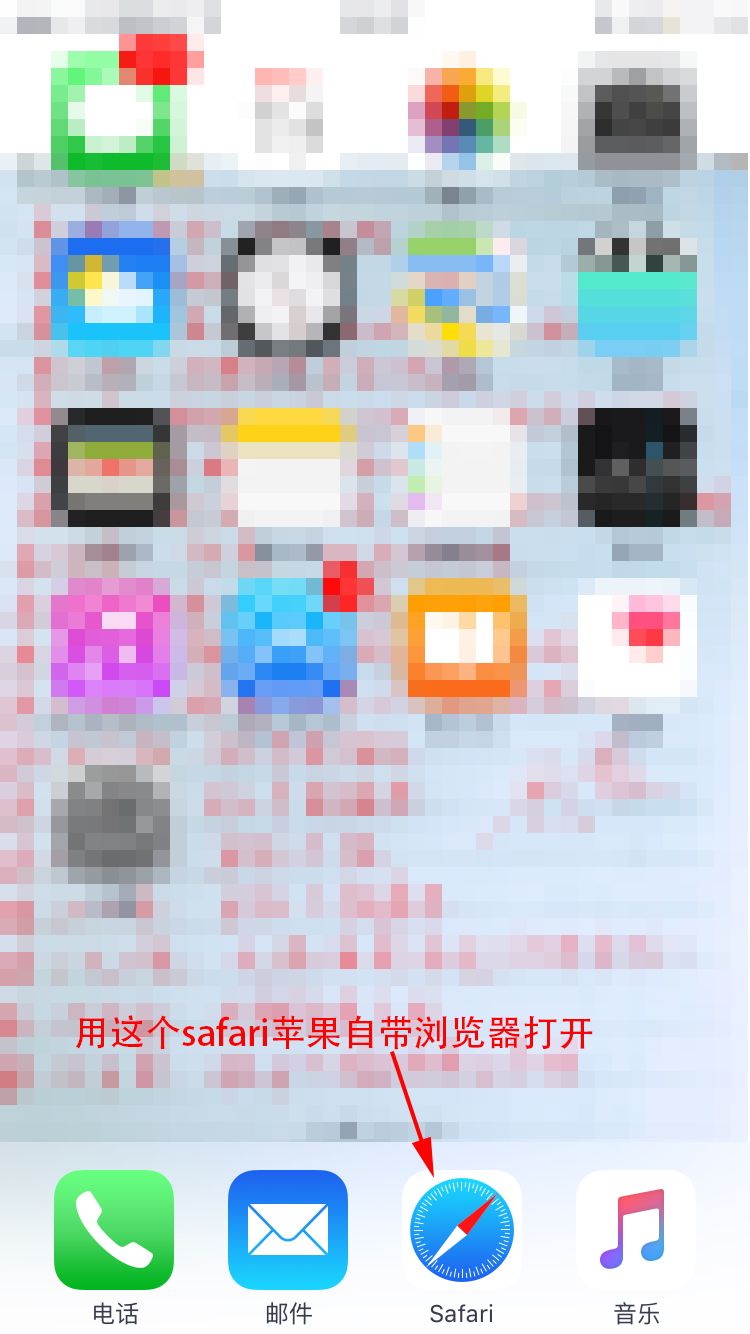
<style>
.page{position:relative;width:750px;height:1334px}
.page>*{position:absolute;margin:0}
.t1{font:36px "AdobeHeitiStd-Regular";color:#ff0000}
</style>
<div class="page">
<p class="t1" style="left:75px;top:1015px;width:518px;height:35px">用这个safari苹果自带浏览器打开</p>
</div>
